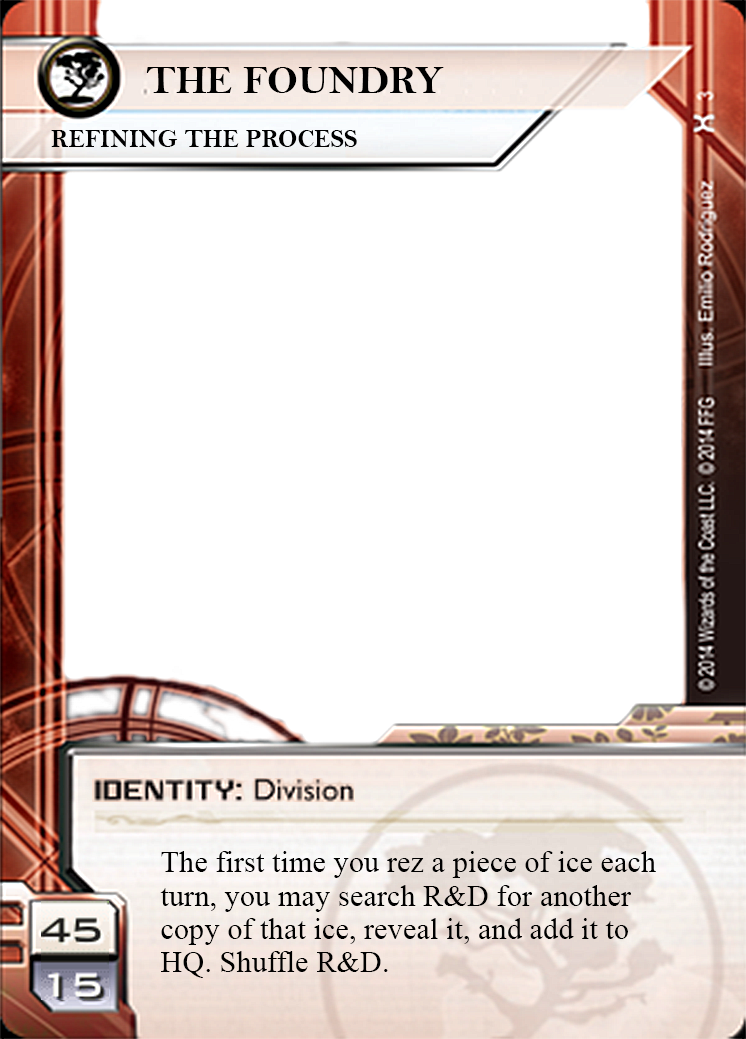
<style>
.page{position:relative;width:746px;height:1039px;background:#ffffff}
.page>*{position:absolute;margin:0}
.t1{font:39.6px "BellMTBold";color:#000000}
.t2{font:25px "BellMTBold";color:#000000}
.t3{font:30.4px/33.3px "TimesNewRomanPSMT";color:#000000}
</style>
<div class="page">
<p class="t1" style="left:146px;top:67px;width:298px;height:26px">THE FOUNDRY</p>
<p class="t2" style="left:51px;top:130px;width:306px;height:17px">REFINING THE PROCESS</p>
<p class="t3" style="left:160px;top:851px;width:496px;height:127px">The first time you rez a piece of ice each turn, you may search R&amp;D for another copy of that ice, reveal it, and add it to HQ. Shuffle R&amp;D.</p>
</div>
